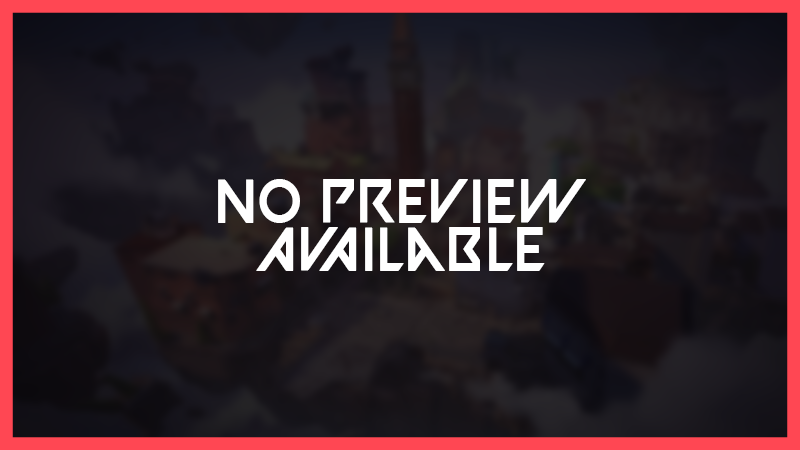
<style>
.page{position:relative;width:800px;height:450px}
.page>*{position:absolute;margin:0}
.t1{font:62px/24px "VALORANT-Regular";color:#ffffff;scale:0.91 1}
</style>
<div class="page">
<p class="t1" style="left:218px;top:179px;width:368px;height:92px;text-align:center">No Preview<br><br>AvAilable</p>
</div>
